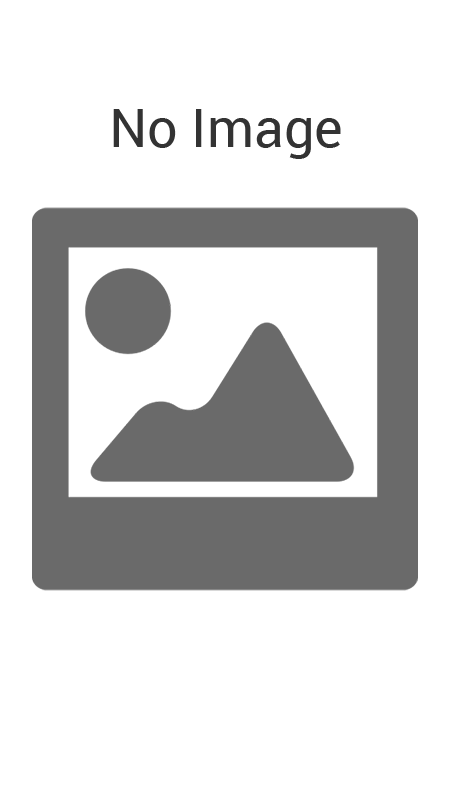
<style>
.page{position:relative;width:450px;height:798px;background:#ffffff}
.page>*{position:absolute;margin:0}
.t1{font:54px "Roboto-Regular";color:#333333}
</style>
<div class="page">
<p class="t1" style="left:113px;top:109px;width:228px;height:50px">No Image</p>
</div>
